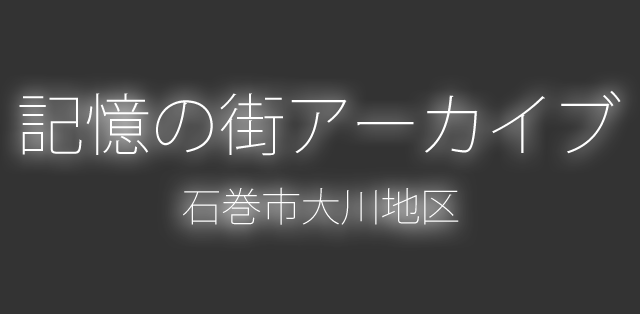
<style>
.page{position:relative;width:640px;height:314px;background:#333333}
.page>*{position:absolute;margin:0}
.t1{font:67.1px "KozGoPr6N-ExtraLight";color:#ffffff}
.t2{font:39.8px "KozGoPr6N-ExtraLight";color:#ffffff}
</style>
<div class="page">
<p class="t1" style="left:19px;top:90px;width:602px;height:66px">記憶の街アーカイブ</p>
<p class="t2" style="left:183px;top:187px;width:276px;height:38px">石巻市大川地区</p>
</div>
